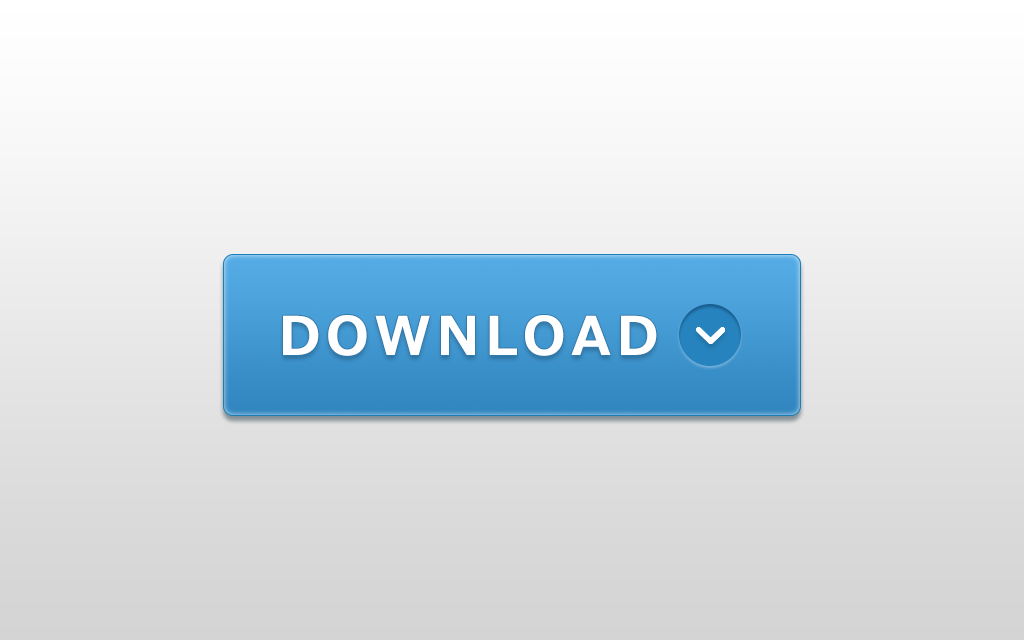
<style>
.page{position:relative;width:1024px;height:640px}
.page>*{position:absolute;margin:0}
.t1{font:53.4px "Meiryo-Bold";letter-spacing:0.104em;color:#ffffff}
</style>
<div class="page">
<p class="t1" style="left:283px;top:315px;width:374px;height:41px">DOWNLOAD</p>
</div>
